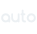
<style>
.page{position:relative;width:37px;height:34px;background:#ffffff}
.page>*{position:absolute;margin:0}
.t1{font:16px "Comfortaa-Bold";color:#ecf0f3}
</style>
<div class="page">
<p class="t1" style="left:1px;top:9px;width:35px;height:14px">auto</p>
</div>
